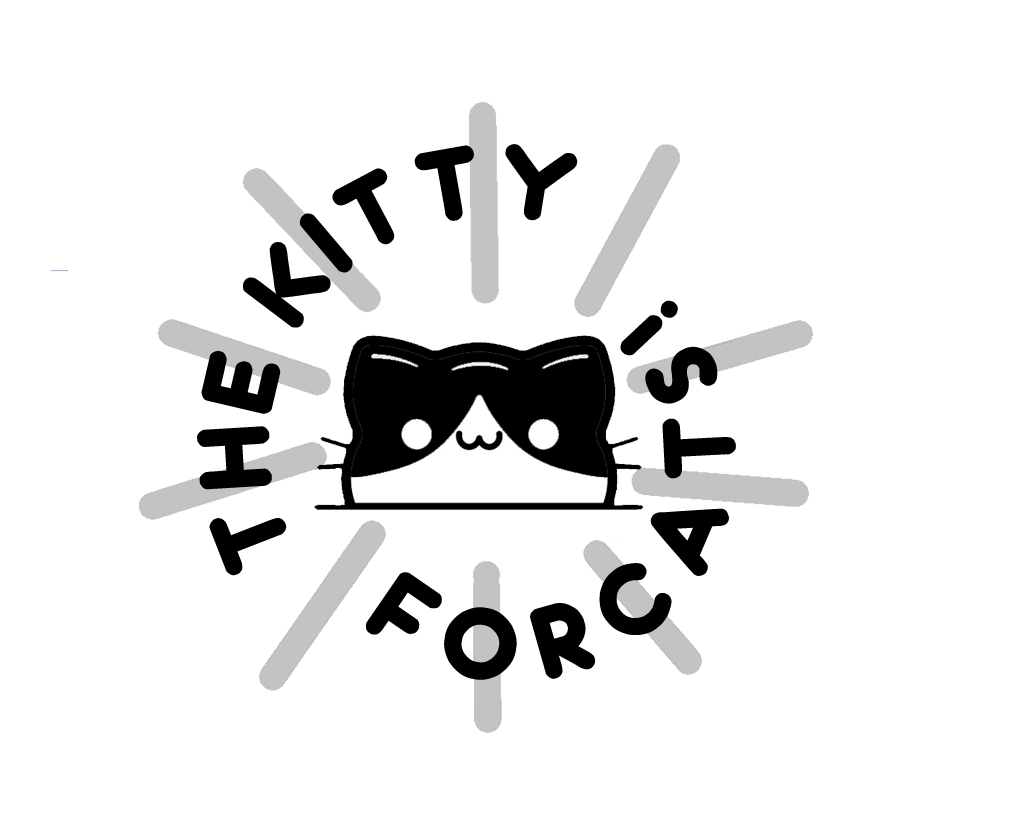
<style>
.page{position:relative;width:1023px;height:832px;background:#ffffff}
.page>*{position:absolute;margin:0}
.t1{font:108.3px "Tondo";color:#000000}
</style>
<div class="page">
<p class="t1" style="left:197px;top:144px;width:381px;height:432px">THE KITTY</p>
<p class="t1" style="left:366px;top:300px;width:370px;height:380px">F O R C A T S !</p>
</div>
